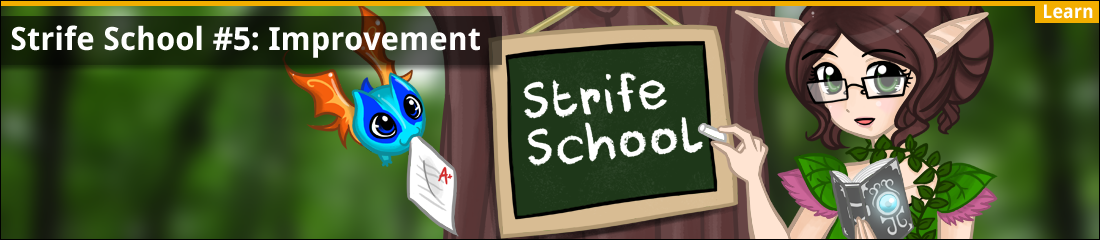
<style>
.page{position:relative;width:1100px;height:240px}
.page>*{position:absolute;margin:0}
.t1{font:18.7px "DroidSans-Bold";color:#fefefe}
.t2{font:32px "DroidSans-Bold";color:#fefefe}
</style>
<div class="page">
<p class="t1" style="left:1044px;top:4px;width:49px;height:15px">Learn</p>
<p class="t2" style="left:11px;top:25px;width:469px;height:33px">Strife School #5: Improvement</p>
</div>
